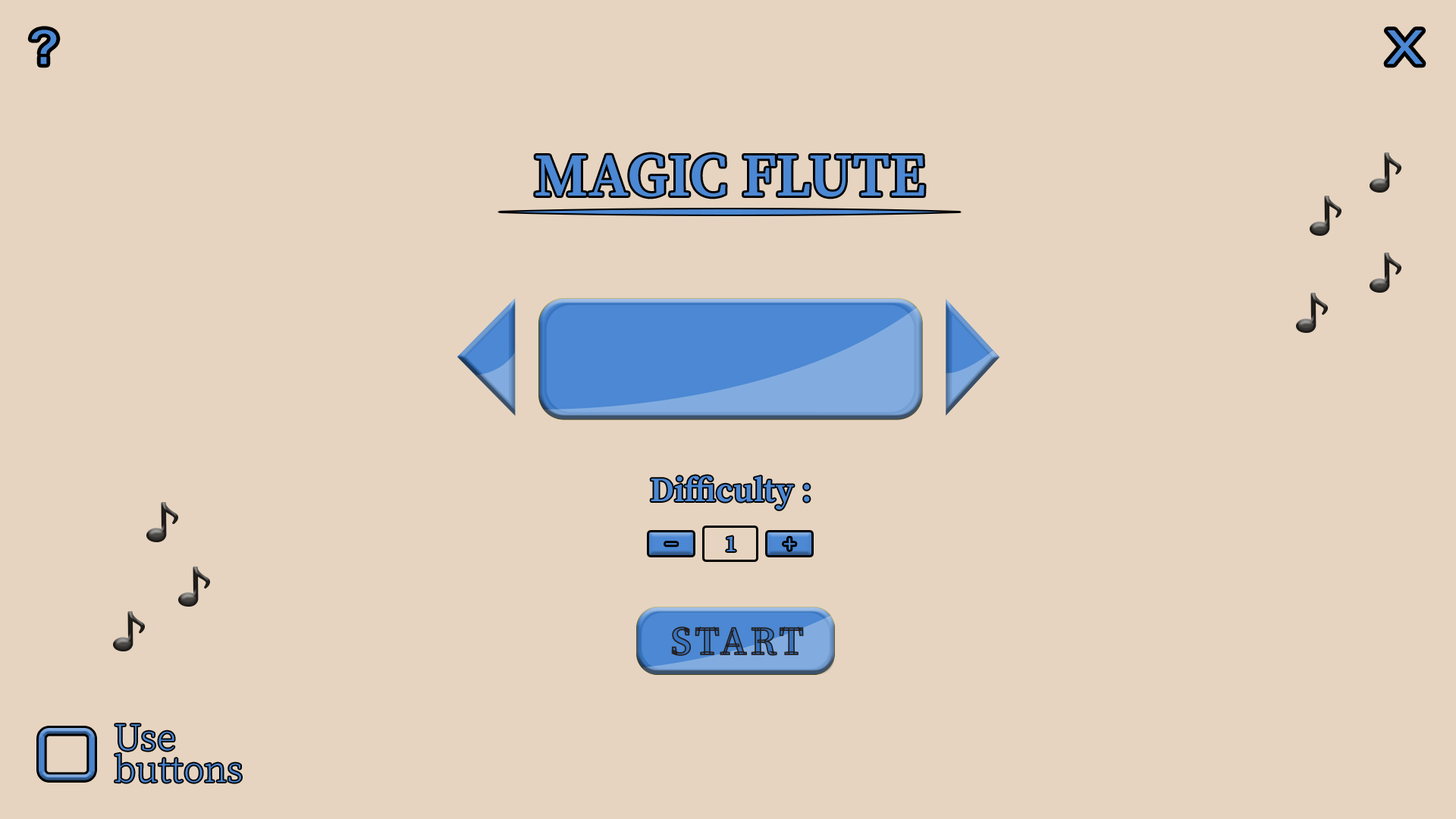
<style>
.page{position:relative;width:1456px;height:819px;background:#e6d4c0}
.page>*{position:absolute;margin:0}
.t1{font:47.9px "AcuminConcept-Regular";color:#4c88d3;scale:1.27 1}
.t2{font:60.7px "SourceSerifRoman-Semibold";color:#4c88d3}
.t3{font:34.1px "SourceSerifRoman-Semibold";color:#4c88d3}
.t4{font:22.7px "SourceSerifRoman-Semibold";color:#4c88d3}
.t5{font:37.9px/31.8px "SourceSerifRoman-Light";color:#4c88d3}
</style>
<div class="page">
<p class="t1" style="left:31px;top:30px;width:26px;height:34px">?</p>
<p class="t1" style="left:1387px;top:30px;width:36px;height:34px">X</p>
<p class="t2" style="left:535px;top:154px;width:389px;height:43px">MAGIC FLUTE</p>
<p class="t3" style="left:651px;top:475px;width:159px;height:35px">Difficulty :</p>
<p class="t4" style="left:666px;top:543px;width:11px;height:2px">−</p>
<p class="t4" style="left:726px;top:536px;width:10px;height:15px">1</p>
<p class="t4" style="left:784px;top:538px;width:11px;height:12px">+</p>
<p class="t5" style="left:115px;top:724px;width:126px;height:59px">Use<br>buttons</p>
</div>
